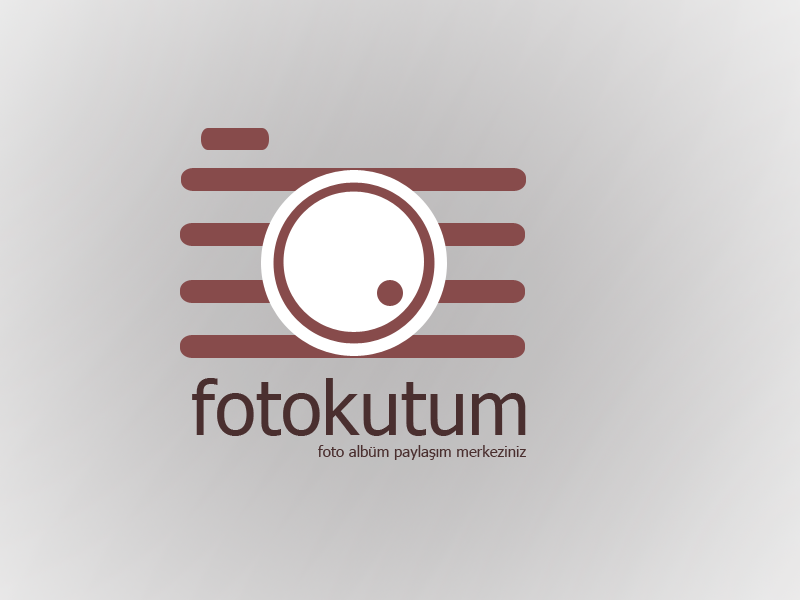
<style>
.page{position:relative;width:800px;height:600px}
.page>*{position:absolute;margin:0}
.t1{font:75px "Tahoma";color:#4a2f2f}
.t2{font:15px "Tahoma";color:#4a2f2f}
</style>
<div class="page">
<p class="t1" style="left:192px;top:378px;width:334px;height:58px">fotokutum</p>
<p class="t2" style="left:318px;top:445px;width:208px;height:15px">foto albüm paylaşım merkeziniz</p>
</div>
